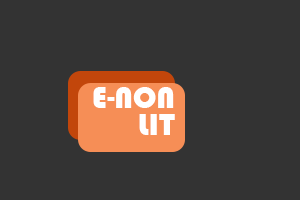
<style>
.page{position:relative;width:300px;height:200px;background:#333333}
.page>*{position:absolute;margin:0}
.t1{font:31.3px/26.1px "Bauhaus93";color:#ffffff}
</style>
<div class="page">
<p class="t1" style="left:93px;top:87px;width:82px;height:48px;text-align:right">E-NON<br>   LIT</p>
</div>
